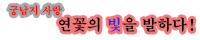
<style>
.page{position:relative;width:200px;height:40px;background:#ffffff}
.page>*{position:absolute;margin:0}
.t1{font:10px "H2mjrE";color:#ff0000}
.t2{font:15px "H2mjrE";color:#000000}
.t3{font:15px "H2mjrE";color:#3427df}
</style>
<div class="page">
<p class="t1" style="left:9px;top:5px;width:53px;height:11px">궁남지 사랑</p>
<p class="t2" style="left:58px;top:17px;width:136px;height:15px">연꽃의 <span class="t3">빛</span>을 발하다!</p>
</div>
